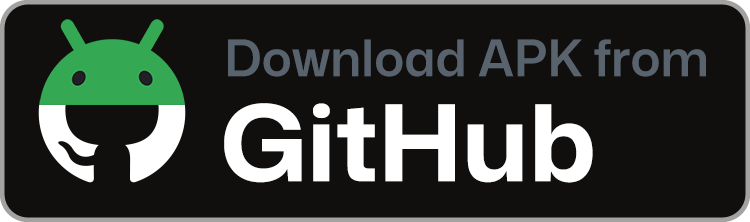
<style>
.page{position:relative;width:750px;height:222px;background:#100f0d}
.page>*{position:absolute;margin:0}
.t1{font:49.9px "MonaSans-SemiBold";color:#59636e}
.t2{font:105.6px "MonaSans-Bold";color:#ffffff}
</style>
<div class="page">
<p class="t1" style="left:228px;top:39px;width:478px;height:38px">Download APK from</p>
<p class="t2" style="left:224px;top:103px;width:369px;height:80px">GitHub</p>
</div>
